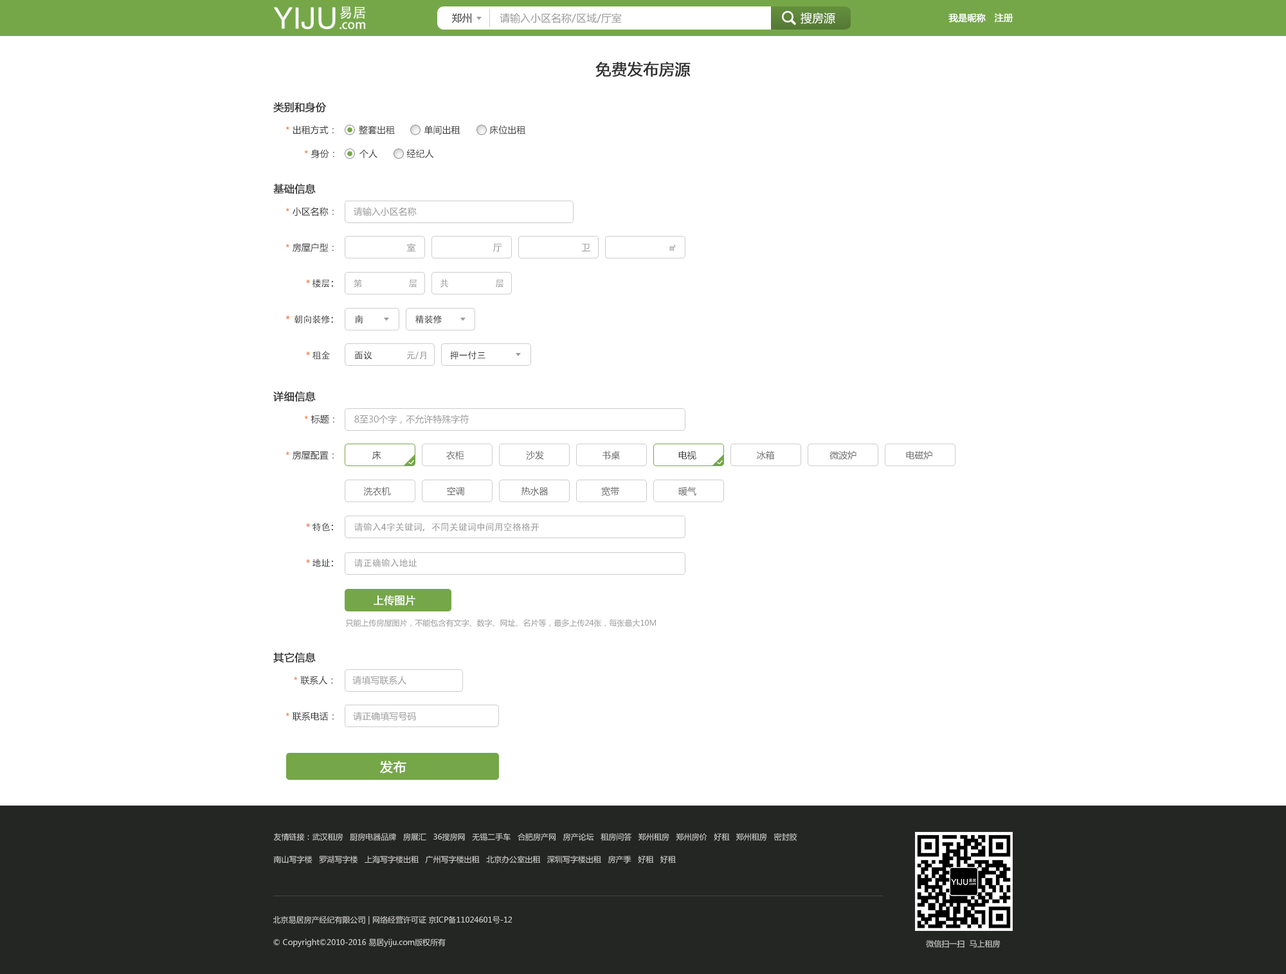
<style>
.page{position:relative;width:1286px;height:974px;background:#ffffff}
.page>*{position:absolute;margin:0}
.t1{font:10.3px "MicrosoftYaHei";color:#999999}
.t2{font:10.3px "MicrosoftYaHei";color:#333333}
.t3{font:11.6px "MicrosoftYaHei";color:#ffffff}
.t4{font:9px "MicrosoftYaHei";color:#ffffff;font-weight:bold}
.t5{font:15.4px "MicrosoftYaHei";color:#333333;font-weight:bold}
.t6{font:10.3px "MicrosoftYaHei";color:#333333;font-weight:bold}
.t7{font:9px/23.8px "MicrosoftYaHei";color:#333333}
.t8{font:9px/23.8px "MicrosoftYaHei";color:#eb5f00}
.t9{font:9px/36px "MicrosoftYaHei";color:#999999}
.t10{font:9px/36px "MicrosoftYaHei";color:#eb5f00}
.t11{font:9px/36px "MicrosoftYaHei";color:#333333}
.t12{font:9px/36px "AdobeHeitiStd-Regular";color:#999999}
.t13{font:9px/36px "AdobeHeitiStd-Regular";color:#eb5f00}
.t14{font:9px/36px "AdobeHeitiStd-Regular";color:#333333}
.t15{font:9px/19.3px "MicrosoftYaHei";color:#666666}
.t16{font:9px/19.3px "MicrosoftYaHei";color:#333333}
.t17{font:7.7px/21.9px "MicrosoftYaHei";color:#999999}
.t18{font:10.3px/21.9px "MicrosoftYaHei";color:#ffffff;font-weight:bold}
.t19{font:12.9px "MicrosoftYaHei";color:#ffffff;font-weight:bold}
.t20{font:7.7px/22.5px "MicrosoftYaHei";color:#cccccc}
.t21{font:7.7px "MicrosoftYaHei";color:#cccccc}
</style>
<div class="page">
<p class="t1" style="left:451px;top:13px;width:171px;height:10px"><span class="t2">郑州         </span>请输入小区名称/区域/厅室</p>
<p class="t3" style="left:800px;top:12px;width:35px;height:12px">搜房源</p>
<p class="t4" style="left:948px;top:13px;width:65px;height:9px">我是昵称   注册</p>
<p class="t5" style="left:595px;top:61px;width:95px;height:16px">免费发布房源</p>
<p class="t6" style="left:273px;top:102px;width:54px;height:11px">类别和身份</p>
<p class="t7" style="left:285px;top:125px;width:240px;height:33px"><span class="t8">*</span> 出租方式：        整套出租           单间出租           床位出租<br>       <span class="t8">*</span> 身份：        个人           经纪人</p>
<p class="t6" style="left:273px;top:183px;width:43px;height:11px">基础信息</p>
<p class="t9" style="left:285px;top:207px;width:391px;height:153px"><span class="t10">*</span><span class="t11"> 小区名称：      </span>请输入小区名称<br><span class="t10">*</span><span class="t11"> 房屋户型：                          </span>室                             厅                              卫                             <span class="t12">㎡<br>          </span><span class="t13">* </span><span class="t14">楼层：</span><span class="t12">       第                       层           共                       层<br></span><span class="t13">*  </span><span class="t14">朝向装修：        南                          精装修<br>          </span><span class="t13">* </span><span class="t14">租金            面议         </span><span class="t12">       元/月           </span><span class="t14">押一付三</span></p>
<p class="t6" style="left:273px;top:391px;width:43px;height:11px">详细信息</p>
<p class="t15" style="left:285px;top:415px;width:647px;height:153px"><span class="t10">       *</span><span class="t11"> 标题：      </span><span class="t9">8至30个字，不允许特殊字符<br></span><span class="t10">*</span><span class="t11"> 房屋配置：             </span><span class="t16">床                         </span>衣柜                        沙发                      书桌                        <span class="t16">电视                       </span>冰箱                     微波炉                  电磁炉           <br>                             洗衣机                      空调                     热水器                    宽带                      暖气 <br>          <span class="t13">* </span><span class="t14">特色：       </span><span class="t12">请输入4字关键词，不同关键词中间用空格格开<br></span><span class="t13">          * </span><span class="t14">地址：       </span><span class="t12">请正确输入地址</span></p>
<p class="t17" style="left:346px;top:595px;width:310px;height:32px"><span class="t18">         上传图片 <br> </span>只能上传房屋图片，不能包含有文字、数字、网址、名片等，最多上传24张，每张最大10M</p>
<p class="t6" style="left:273px;top:652px;width:43px;height:11px">其它信息</p>
<p class="t9" style="left:285px;top:676px;width:131px;height:45px"><span class="t10">   *</span><span class="t11"> 联系人：      </span>请填写联系人<br><span class="t10">*</span><span class="t11"> 联系电话：      </span>请正确填写号码</p>
<p class="t19" style="left:380px;top:760px;width:26px;height:13px">发布</p>
<p class="t20" style="left:273px;top:833px;width:524px;height:30px">友情链接：武汉租房   厨房电器品牌   房展汇   36搜房网   无锡二手车   合肥房产网   房产论坛   租房问答   郑州租房   郑州房价   好租   郑州租房   密封胶   <br>南山写字楼   罗湖写字楼   上海写字楼出租   广州写字楼出租   北京办公室出租   深圳写字楼出租   房产季   好租   好租</p>
<p class="t20" style="left:273px;top:915px;width:239px;height:32px">北京易居房产经纪有限公司 | 网络经营许可证 京ICP备11024601号-12<br>© Copyright©2010-2016 易居yiju.com版权所有</p>
<p class="t21" style="left:926px;top:940px;width:74px;height:8px">微信扫一扫  马上租房</p>
</div>
